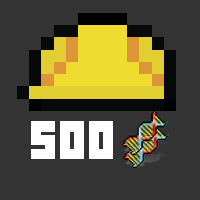
<style>
.page{position:relative;width:200px;height:200px;background:#333333}
.page>*{position:absolute;margin:0}
.t1{font:48px "04b19";letter-spacing:0.025em;color:#ffffff}
</style>
<div class="page">
<p class="t1" style="left:31px;top:121px;width:82px;height:38px">500</p>
</div>
